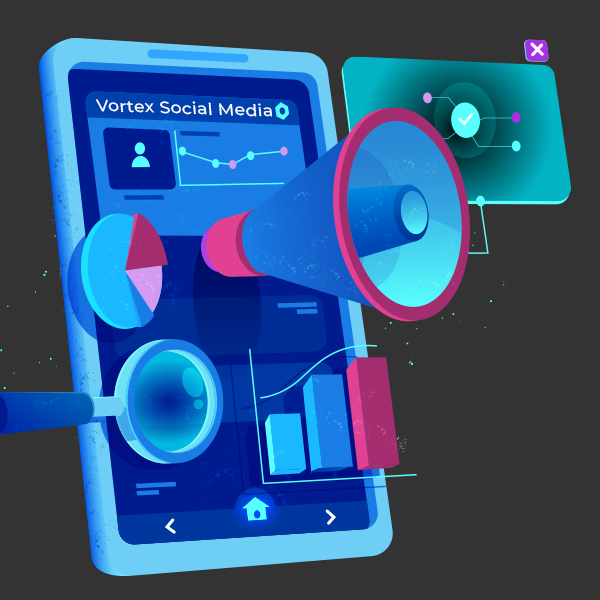
<style>
.page{position:relative;width:600px;height:600px;background:#333333}
.page>*{position:absolute;margin:0}
.t1{font:16.4px "Montserrat-Medium";letter-spacing:0.02em;color:#ffffff;scale:1.05 1}
</style>
<div class="page">
<p class="t1" style="left:95px;top:99px;width:178px;height:18px;rotate:2deg">Vortex Social Media</p>
</div>
